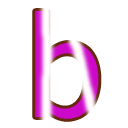
<style>
.page{position:relative;width:128px;height:128px;background:#ffffff}
.page>*{position:absolute;margin:0}
.t1{font:132.9px "SourceHanSansCN-Regular"}
</style>
<div class="page">
<p class="t1" style="left:35px;top:11px;width:64px;height:108px">b</p>
</div>
